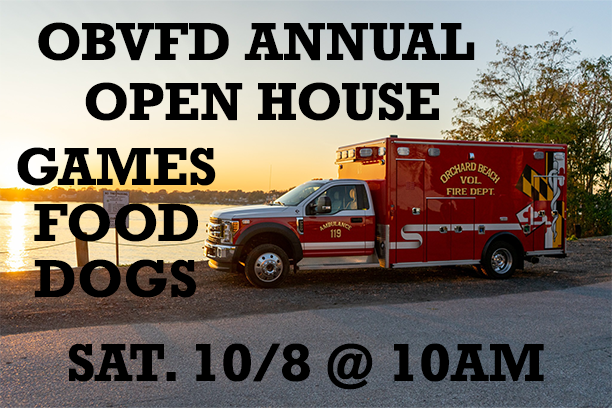
<style>
.page{position:relative;width:612px;height:408px}
.page>*{position:absolute;margin:0}
.t1{font:50px "Rockwell-Bold";color:#000000}
</style>
<div class="page">
<p class="t1" style="left:38px;top:22px;width:437px;height:99px;text-align:center">OBVFD ANNUAL <br>OPEN HOUSE</p>
<p class="t1" style="left:17px;top:147px;width:199px;height:39px">GAMES</p>
<p class="t1" style="left:34px;top:203px;width:164px;height:39px">FOOD</p>
<p class="t1" style="left:34px;top:259px;width:162px;height:39px">DOGS</p>
<p class="t1" style="left:68px;top:343px;width:476px;height:47px">SAT. 10/8 @ 10AM</p>
</div>
